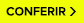
<style>
.page{position:relative;width:84px;height:23px;background:#f0ff07}
.page>*{position:absolute;margin:0}
.t1{font:12.4px "ProximaNova-Semibold";color:#000000;text-transform:uppercase}
</style>
<div class="page">
<p class="t1" style="left:6px;top:7px;width:60px;height:9px">conferir</p>
</div>
